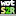
<style>
.page{position:relative;width:16px;height:16px;background:#000000}
.page>*{position:absolute;margin:0}
.t1{font:9px/8px "Consolas";letter-spacing:-0.075em;color:#ffffff;font-weight:bold}
.t2{font:9px/8px "Consolas";letter-spacing:-0.075em;color:#e9e691;font-weight:bold}
.t3{font:9px/8px "Consolas";letter-spacing:-0.075em;color:#4fdb11;font-weight:bold}
.t4{font:9px/8px "Consolas";letter-spacing:-0.075em;color:#ace494;font-weight:bold}
</style>
<div class="page">
<p class="t1" style="left:0px;top:0px;width:15px;height:14px">wot<br><span class="t2">S</span><span class="t3">2</span><span class="t4">R</span></p>
</div>
